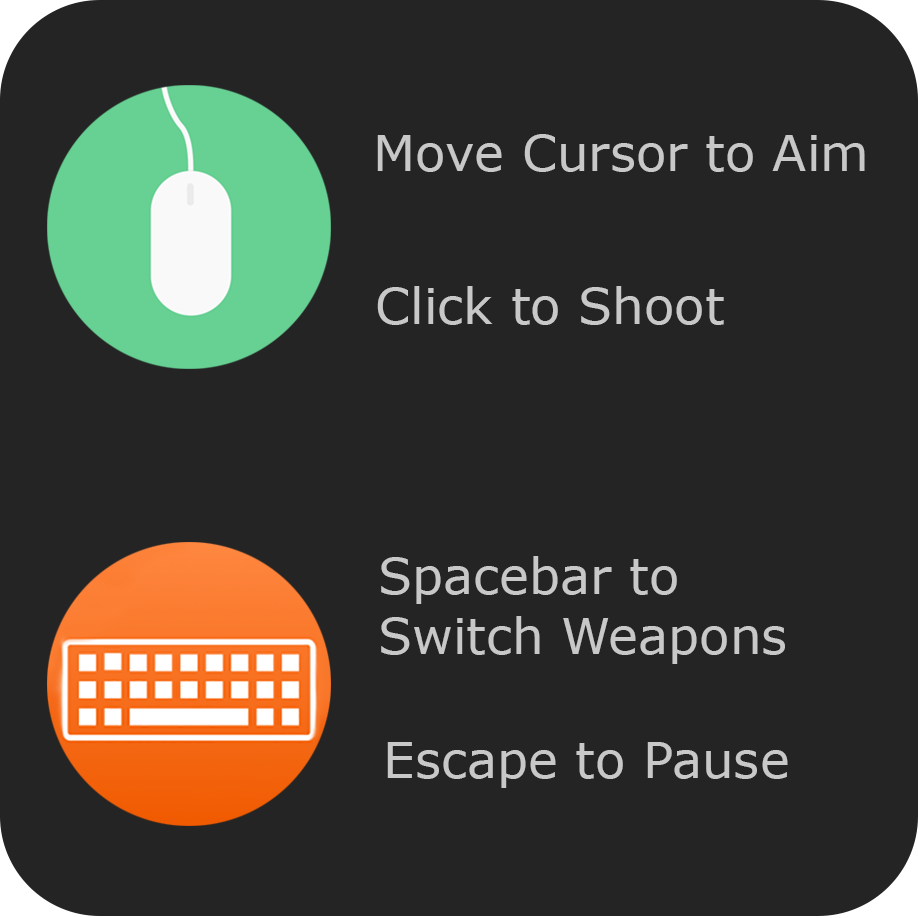
<style>
.page{position:relative;width:918px;height:918px;background:#242424}
.page>*{position:absolute;margin:0}
.t1{font:50px "Verdana";color:#c8c8c8}
</style>
<div class="page">
<p class="t1" style="left:377px;top:134px;width:488px;height:38px">Move Cursor to Aim</p>
<p class="t1" style="left:377px;top:286px;width:347px;height:39px">Click to Shoot</p>
<p class="t1" style="left:381px;top:556px;width:404px;height:108px">Spacebar to<br>Switch Weapons</p>
<p class="t1" style="left:387px;top:742px;width:401px;height:46px">Escape to Pause</p>
</div>
